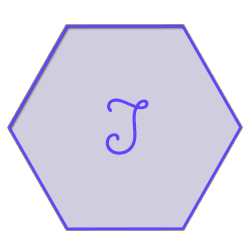
<style>
.page{position:relative;width:250px;height:250px;background:#cfcdde}
.page>*{position:absolute;margin:0}
.t1{font:75px "GiddyupStd";color:#5f45ff}
</style>
<div class="page">
<p class="t1" style="left:105px;top:98px;width:44px;height:57px">J</p>
</div>
